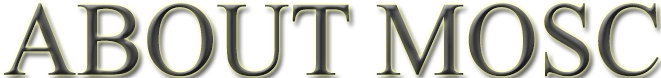
<style>
.page{position:relative;width:661px;height:78px;background:#ffffff}
.page>*{position:absolute;margin:0}
.t1{font:105.5px "TimesNewRomanPSMT";scale:0.96 1}
</style>
<div class="page">
<p class="t1" style="left:4px;top:3px;width:655px;height:74px">ABOUT MOSC</p>
</div>
